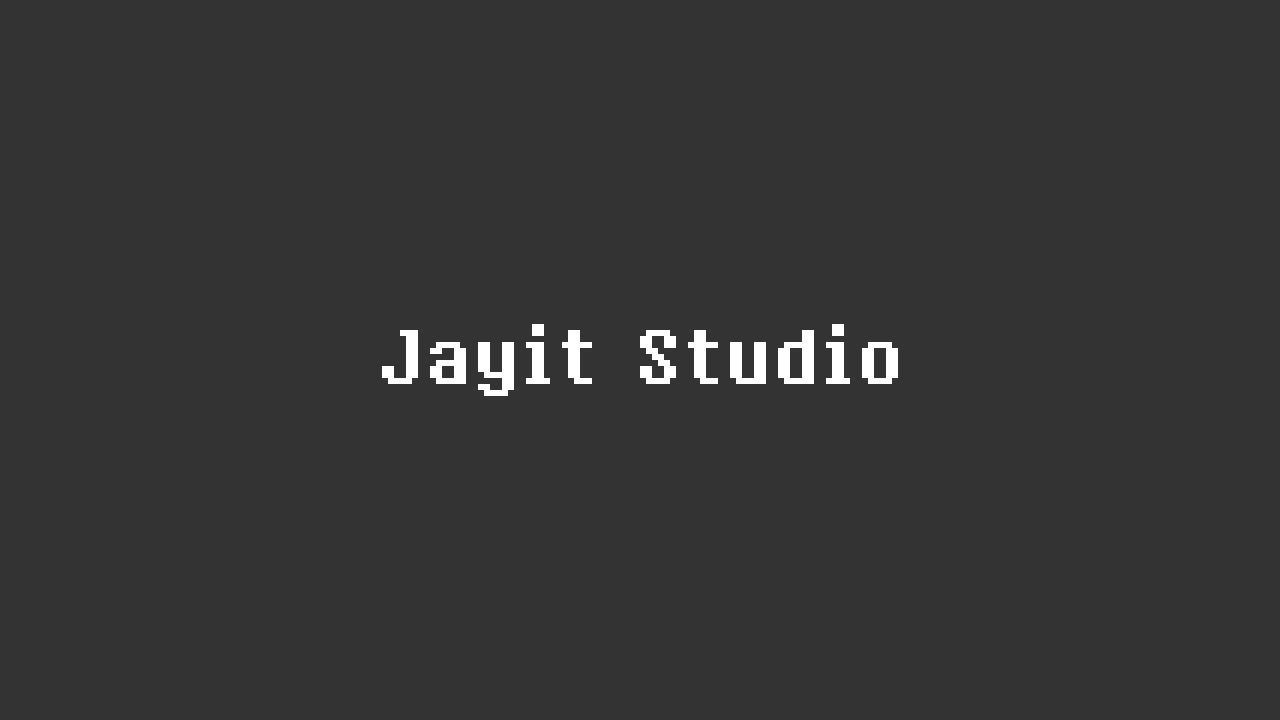
<style>
.page{position:relative;width:1280px;height:720px;background:#333333}
.page>*{position:absolute;margin:0}
.t1{font:64px "8bitoperatorRegular";color:#ffffff}
</style>
<div class="page">
<p class="t1" style="left:382px;top:324px;width:516px;height:72px">Jayit Studio</p>
</div>
